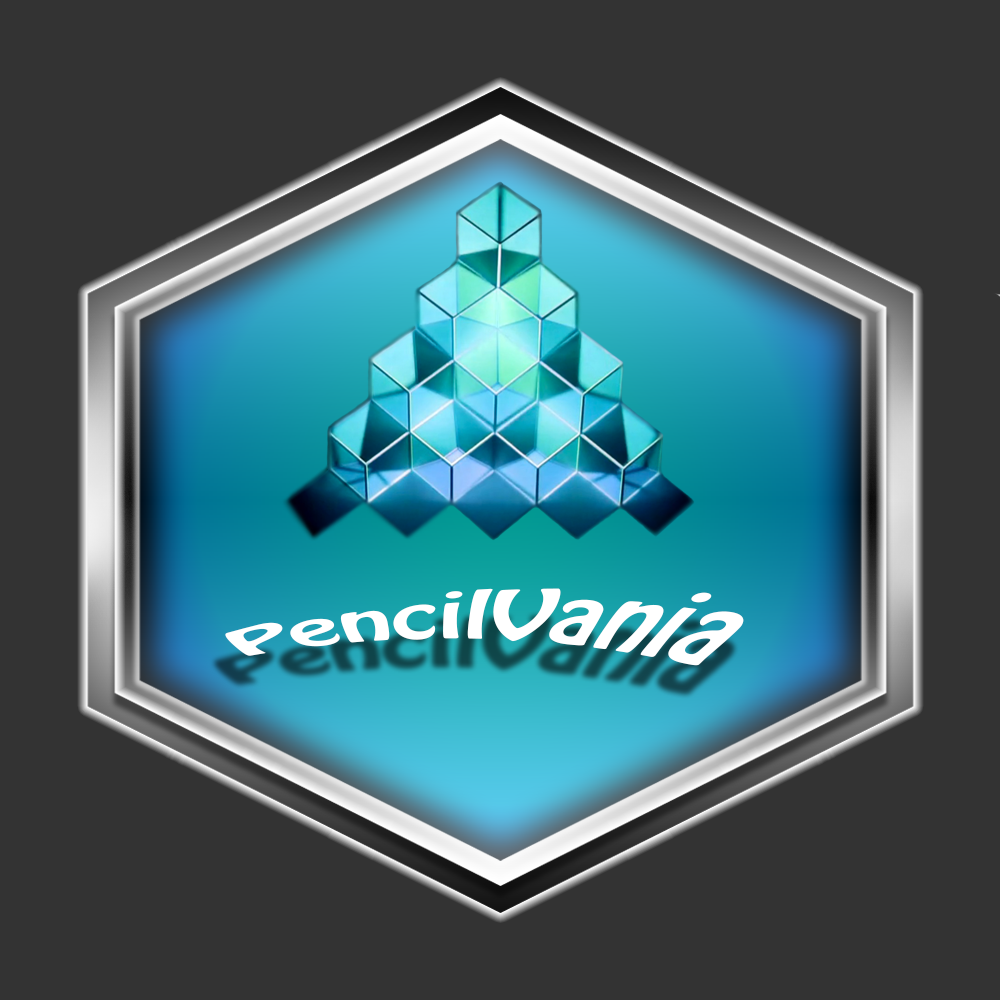
<style>
.page{position:relative;width:1000px;height:1000px;background:#333333}
.page>*{position:absolute;margin:0}
.t1{font:54px "HoboStd";color:#ffffff;scale:1.59 1}
</style>
<div class="page">
<p class="t1" style="left:225px;top:588px;width:519px;height:78px">PencilVania</p>
</div>
